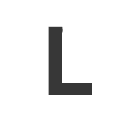
<style>
.page{position:relative;width:128px;height:128px;background:#ffffff}
.page>*{position:absolute;margin:0}
.t1{font:100px "RictyDiminishedDiscord-Bold";color:#373737}
</style>
<div class="page">
<p class="t1" style="left:48px;top:26px;width:44px;height:69px">L</p>
</div>
